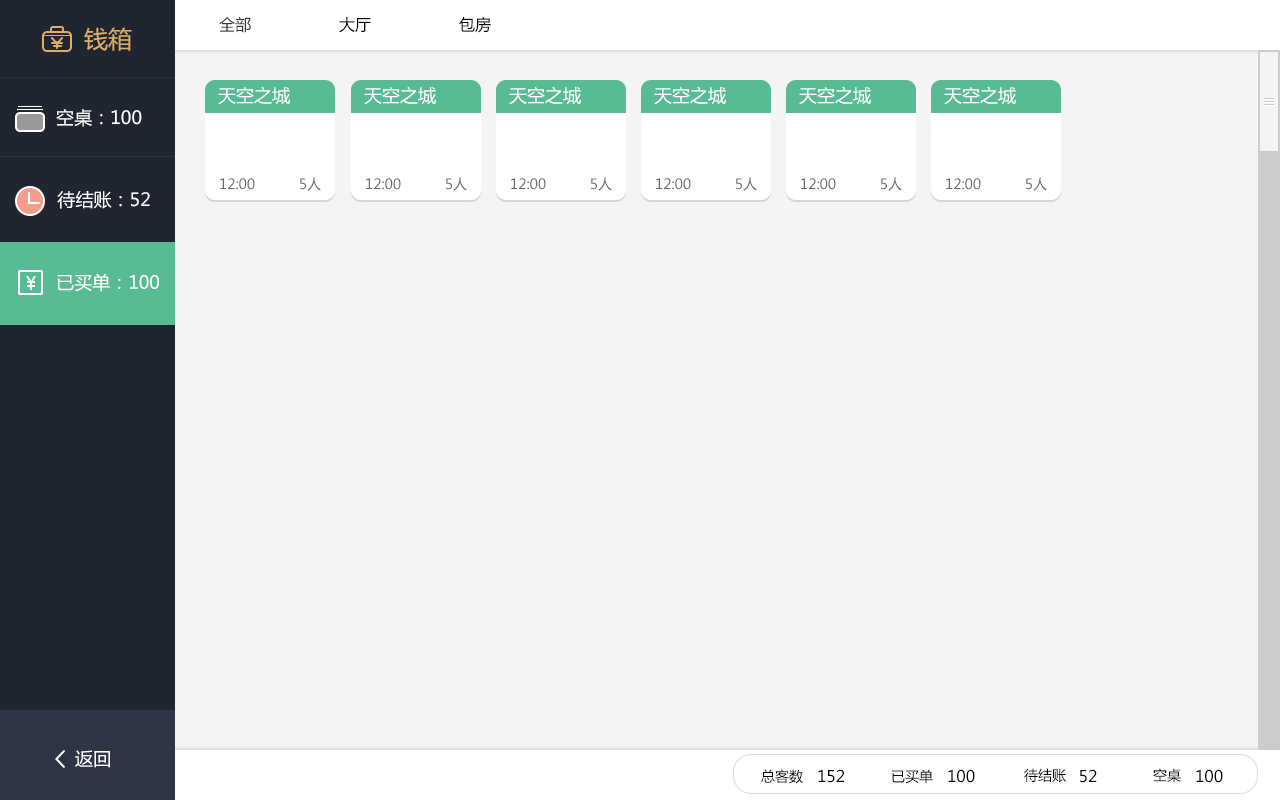
<style>
.page{position:relative;width:1280px;height:800px;background:#f4f4f4}
.page>*{position:absolute;margin:0}
.t1{font:16px "MicrosoftYaHei";color:#333333}
.t2{font:16px "MicrosoftYaHei";color:#000000}
.t3{font:24px "MicrosoftYaHei";color:#dcaf69}
.t4{font:18px "MicrosoftYaHei";color:#ffffff}
.t5{font:14px "MicrosoftYaHei";color:#666666}
.t6{font:14px "MicrosoftYaHei";color:#000000}
</style>
<div class="page">
<p class="t1" style="left:219px;top:17px;width:32px;height:16px">全部</p>
<p class="t2" style="left:339px;top:17px;width:32px;height:16px">大厅</p>
<p class="t2" style="left:459px;top:17px;width:32px;height:16px">包房</p>
<p class="t3" style="left:84px;top:27px;width:48px;height:24px">钱箱</p>
<p class="t4" style="left:218px;top:86px;width:72px;height:19px">天空之城</p>
<p class="t4" style="left:364px;top:86px;width:72px;height:19px">天空之城</p>
<p class="t4" style="left:509px;top:86px;width:72px;height:19px">天空之城</p>
<p class="t4" style="left:654px;top:86px;width:72px;height:19px">天空之城</p>
<p class="t4" style="left:799px;top:86px;width:72px;height:19px">天空之城</p>
<p class="t4" style="left:944px;top:86px;width:72px;height:19px">天空之城</p>
<p class="t4" style="left:56px;top:109px;width:86px;height:18px">空桌：100</p>
<p class="t5" style="left:220px;top:178px;width:35px;height:12px">12:00</p>
<p class="t5" style="left:300px;top:177px;width:21px;height:14px">5人</p>
<p class="t5" style="left:366px;top:178px;width:35px;height:12px">12:00</p>
<p class="t5" style="left:446px;top:177px;width:21px;height:14px">5人</p>
<p class="t5" style="left:511px;top:178px;width:35px;height:12px">12:00</p>
<p class="t5" style="left:591px;top:177px;width:21px;height:14px">5人</p>
<p class="t5" style="left:656px;top:178px;width:35px;height:12px">12:00</p>
<p class="t5" style="left:736px;top:177px;width:21px;height:14px">5人</p>
<p class="t5" style="left:801px;top:178px;width:35px;height:12px">12:00</p>
<p class="t5" style="left:881px;top:177px;width:21px;height:14px">5人</p>
<p class="t5" style="left:946px;top:178px;width:35px;height:12px">12:00</p>
<p class="t5" style="left:1026px;top:177px;width:21px;height:14px">5人</p>
<p class="t4" style="left:57px;top:191px;width:93px;height:18px">待结账：52</p>
<p class="t4" style="left:57px;top:273px;width:102px;height:19px">已买单：100</p>
<p class="t4" style="left:75px;top:750px;width:35px;height:18px">返回</p>
<p class="t6" style="left:761px;top:769px;width:42px;height:15px">总客数</p>
<p class="t2" style="left:818px;top:769px;width:26px;height:14px">152</p>
<p class="t6" style="left:892px;top:769px;width:41px;height:15px">已买单</p>
<p class="t2" style="left:948px;top:769px;width:27px;height:14px">100</p>
<p class="t6" style="left:1024px;top:768px;width:42px;height:14px">待结账</p>
<p class="t2" style="left:1080px;top:769px;width:17px;height:14px">52</p>
<p class="t6" style="left:1153px;top:768px;width:28px;height:15px">空桌</p>
<p class="t2" style="left:1196px;top:769px;width:27px;height:14px">100</p>
</div>
